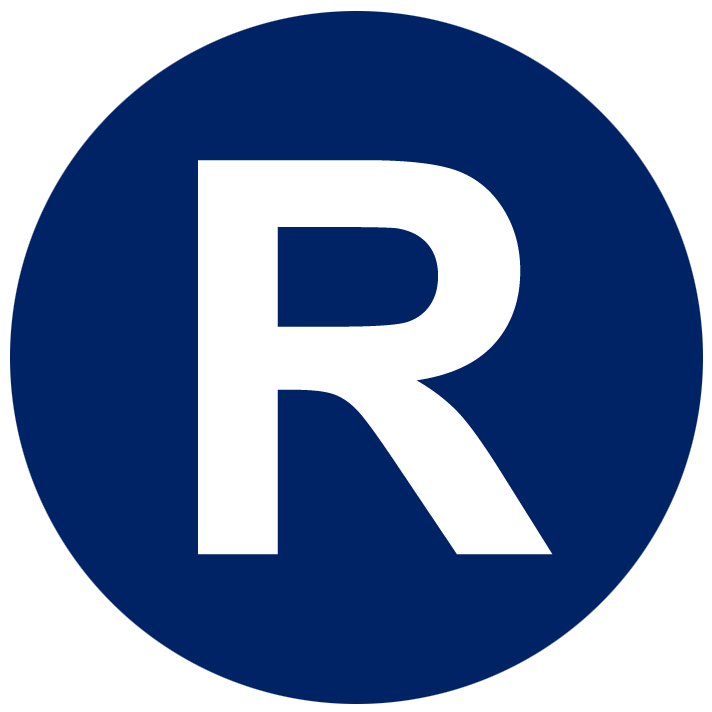
<style>
.page{position:relative;width:712px;height:712px;background:#002366}
.page>*{position:absolute;margin:0}
.t1{font:550px "Arial-BoldMT";letter-spacing:-0.06em;color:#ffffff}
</style>
<div class="page">
<p class="t1" style="left:198px;top:160px;width:355px;height:395px">R</p>
</div>
